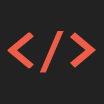
<style>
.page{position:relative;width:104px;height:104px;background:#222222}
.page>*{position:absolute;margin:0}
.t1{font:64px "Consolas";letter-spacing:-0.035em;color:#ef5d49;font-weight:bold}
.t2{font:52px "Consolas-Bold";letter-spacing:-0.035em;color:#ef5d49}
.t3{font:64px "Consolas-Bold";letter-spacing:-0.035em;color:#ef5d49}
</style>
<div class="page">
<p class="t1" style="left:7px;top:31px;width:89px;height:42px">&lt;<span class="t2">/</span><span class="t3">&gt;</span></p>
</div>
